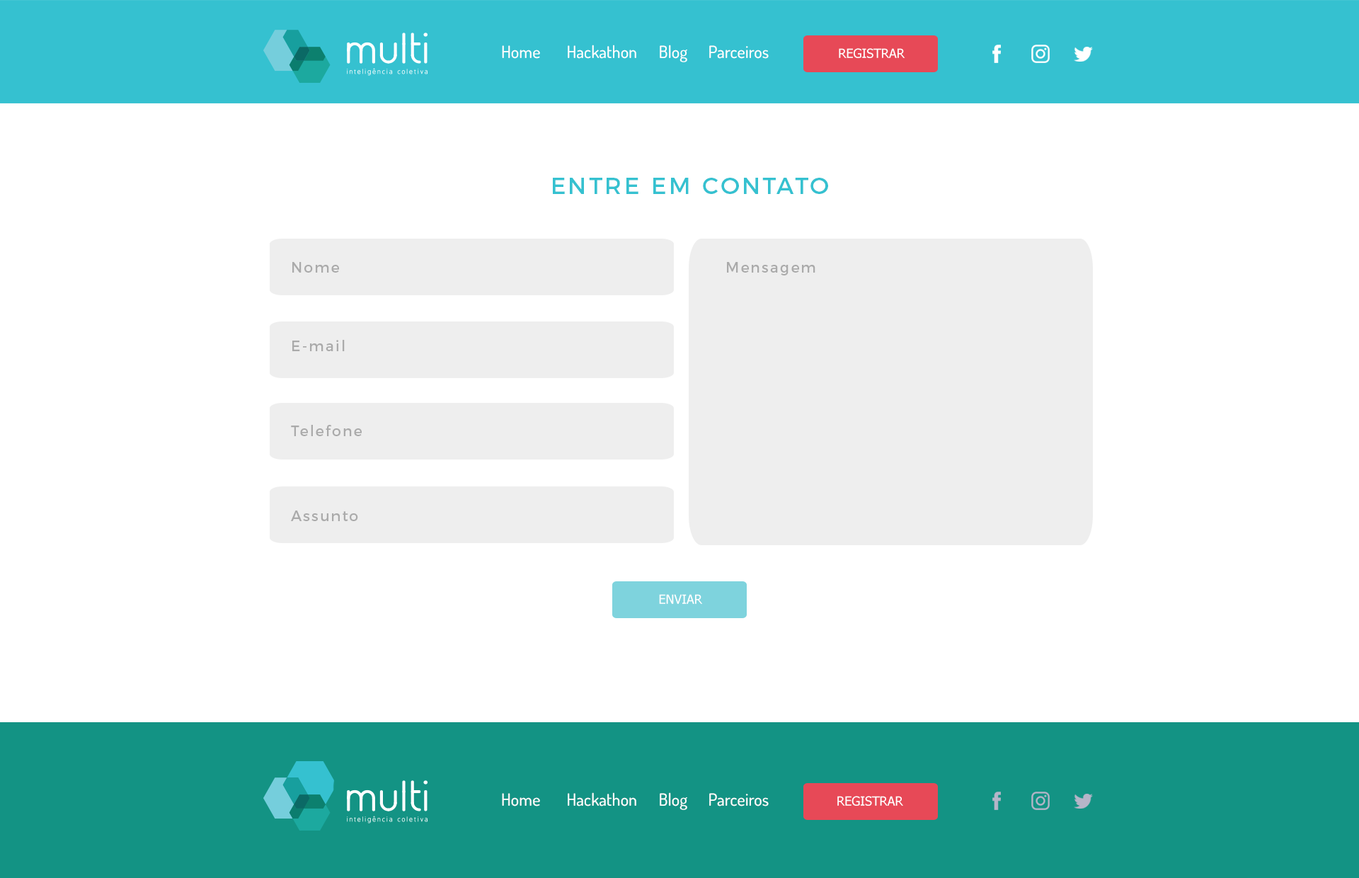
<style>
.page{position:relative;width:1359px;height:878px;background:#ffffff}
.page>*{position:absolute;margin:0}
.t1{font:17px "Dosis-Medium";color:#ffffff}
.t2{font:12.7px "Tahoma";color:#ffffff}
.t3{font:23.4px "Montserrat-Regular";letter-spacing:0.1em;color:#35c1d0}
.t4{font:14.6px "Montserrat-Regular";letter-spacing:0.1em;color:#aaaaaa}
</style>
<div class="page">
<p class="t1" style="left:502px;top:45px;width:38px;height:14px">Home</p>
<p class="t1" style="left:568px;top:45px;width:68px;height:14px">Hackathon</p>
<p class="t1" style="left:660px;top:45px;width:27px;height:17px">Blog</p>
<p class="t1" style="left:709px;top:45px;width:60px;height:14px">Parceiros</p>
<p class="t2" style="left:839px;top:48px;width:66px;height:10px">REGISTRAR</p>
<p class="t3" style="left:553px;top:178px;width:275px;height:16px">ENTRE EM CONTATO</p>
<p class="t4" style="left:292px;top:262px;width:47px;height:10px">Nome</p>
<p class="t4" style="left:727px;top:262px;width:88px;height:13px">Mensagem</p>
<p class="t4" style="left:292px;top:340px;width:53px;height:11px">E-mail</p>
<p class="t4" style="left:291px;top:425px;width:71px;height:11px">Telefone</p>
<p class="t4" style="left:291px;top:510px;width:67px;height:11px">Assunto</p>
<p class="t2" style="left:659px;top:594px;width:44px;height:10px">ENVIAR</p>
<p class="t1" style="left:502px;top:793px;width:38px;height:13px">Home</p>
<p class="t1" style="left:568px;top:792px;width:68px;height:14px">Hackathon</p>
<p class="t1" style="left:660px;top:792px;width:27px;height:18px">Blog</p>
<p class="t1" style="left:709px;top:793px;width:60px;height:13px">Parceiros</p>
<p class="t2" style="left:837px;top:795px;width:66px;height:10px">REGISTRAR</p>
</div>
